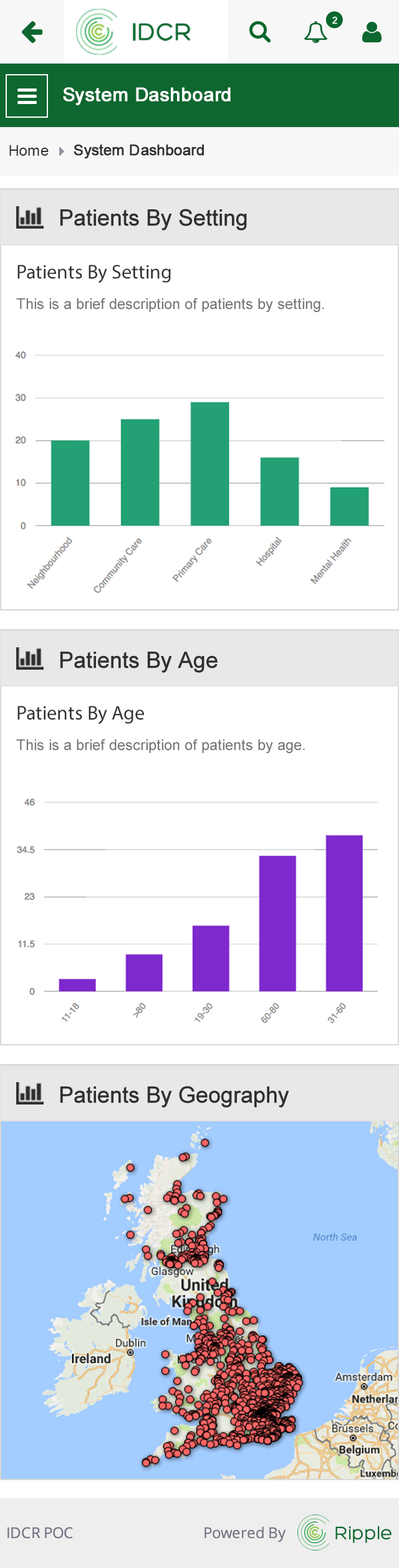
<style>
.page{position:relative;width:399px;height:1568px;background:#ffffff}
.page>*{position:absolute;margin:0}
.t1{font:18.7px "ArialMT";color:#ffffff;font-weight:bold}
.t2{font:15px "ArialMT";color:#313131}
.t3{font:15px "ArialMT";color:#313131;font-weight:bold}
.t4{font:22.4px "ArialMT";color:#303030;font-weight:bold}
.t5{font:19.9px "MyriadPro-Regular";color:#313131}
.t6{font:15px "ArialMT";color:#767676}
</style>
<div class="page">
<p class="t1" style="left:63px;top:87px;width:167px;height:18px">System Dashboard</p>
<p class="t2" style="left:9px;top:145px;width:40px;height:11px">Home</p>
<p class="t3" style="left:74px;top:144px;width:130px;height:15px">System Dashboard</p>
<p class="t4" style="left:60px;top:209px;width:187px;height:21px">Patients By Setting</p>
<p class="t5" style="left:17px;top:265px;width:154px;height:18px">Patients By Setting</p>
<p class="t6" style="left:16px;top:298px;width:308px;height:14px">This is a brief description of patients by setting.</p>
<p class="t4" style="left:60px;top:652px;width:157px;height:21px">Patients By Age</p>
<p class="t5" style="left:17px;top:706px;width:127px;height:18px">Patients By Age</p>
<p class="t6" style="left:16px;top:739px;width:289px;height:14px">This is a brief description of patients by age.</p>
<p class="t4" style="left:60px;top:1086px;width:229px;height:22px">Patients By Geography</p>
</div>
